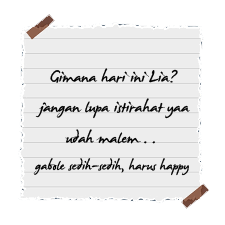
<style>
.page{position:relative;width:225px;height:225px;background:#ededed}
.page>*{position:absolute;margin:0}
.t1{font:26.2px "JamesFajardo";color:#000000}
.t2{font:22.5px "JamesFajardo";color:#000000}
</style>
<div class="page">
<p class="t1" style="left:50px;top:68px;width:128px;height:15px">Gimana hari ini Lia?</p>
<p class="t1" style="left:35px;top:98px;width:155px;height:21px">jangan lupa istirahat yaa</p>
<p class="t1" style="left:65px;top:129px;width:90px;height:15px">udah malem . .</p>
<p class="t2" style="left:33px;top:158px;width:156px;height:18px">gabole sedih-sedih, harus happy</p>
</div>
